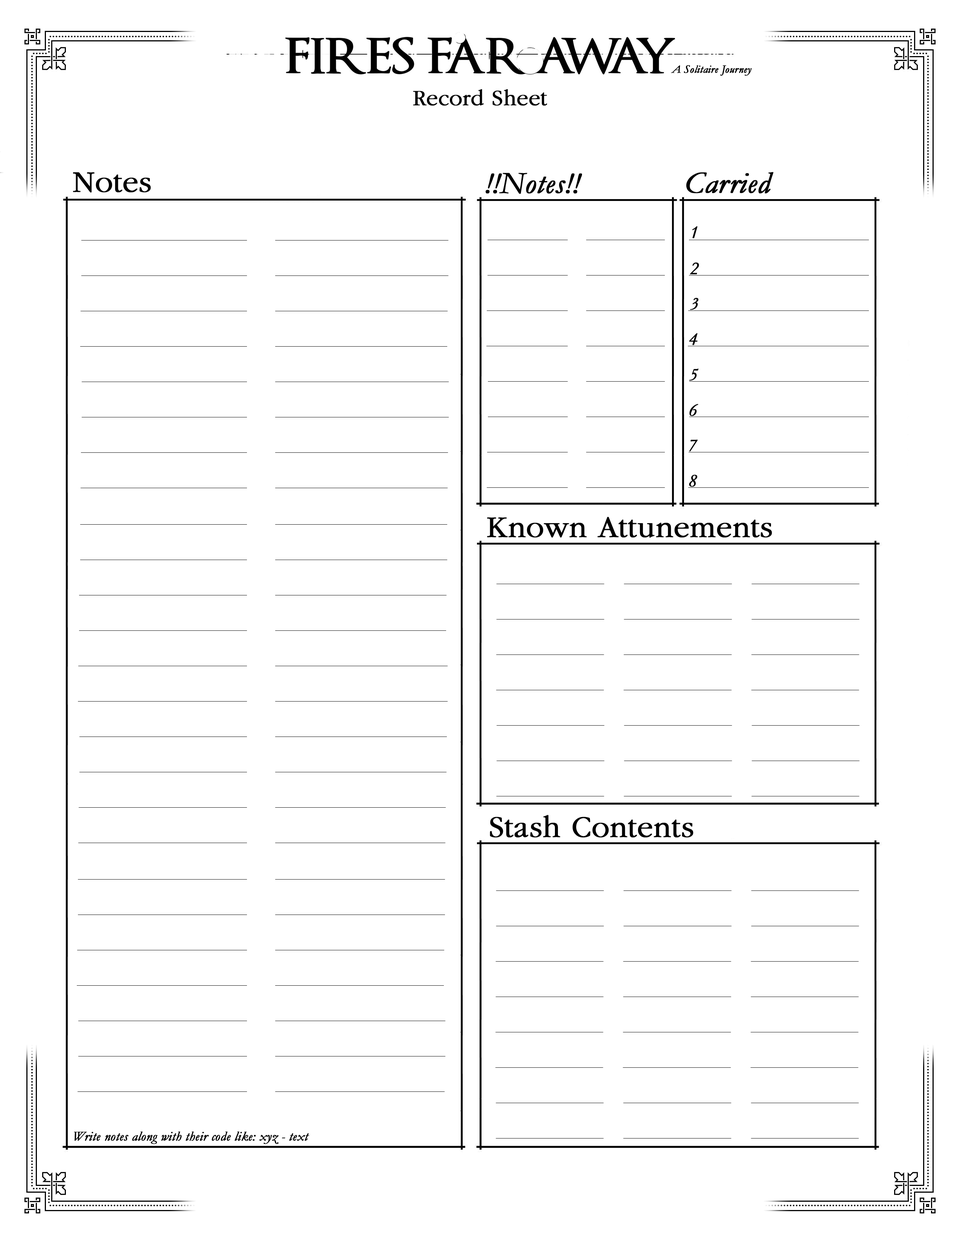
<style>
.page{position:relative;width:960px;height:1242px;background:#ffffff}
.page>*{position:absolute;margin:0}
.t1{font:11.3px "Garamond-Italic";color:#010101;font-weight:bold}
.t2{font:22.6px "Garamond";color:#000000;font-weight:bold}
.t3{font:30.9px "Garamond";color:#000000;font-weight:bold}
.t4{font:30.9px "Garamond-Italic";color:#000000;font-weight:bold}
.t5{font:18.1px "Garamond-Italic";color:#000000;font-weight:bold}
.t6{font:13.6px "Garamond-Italic";color:#000000;font-weight:bold}
</style>
<div class="page">
<p class="t1" style="left:671px;top:65px;width:81px;height:11px">A Solitaire Journey</p>
<p class="t2" style="left:413px;top:89px;width:134px;height:17px">Record Sheet</p>
<p class="t3" style="left:73px;top:172px;width:78px;height:21px">Notes</p>
<p class="t4" style="left:486px;top:173px;width:96px;height:21px">!!Notes!!</p>
<p class="t4" style="left:686px;top:172px;width:88px;height:21px">Carried</p>
<p class="t5" style="left:692px;top:226px;width:6px;height:12px">1</p>
<p class="t5" style="left:690px;top:262px;width:9px;height:12px">2</p>
<p class="t5" style="left:690px;top:298px;width:8px;height:12px">3</p>
<p class="t5" style="left:689px;top:333px;width:9px;height:12px">4</p>
<p class="t5" style="left:689px;top:369px;width:10px;height:12px">5</p>
<p class="t5" style="left:689px;top:404px;width:9px;height:12px">6</p>
<p class="t5" style="left:689px;top:440px;width:9px;height:12px">7</p>
<p class="t5" style="left:689px;top:475px;width:8px;height:12px">8</p>
<p class="t3" style="left:487px;top:517px;width:285px;height:21px">Known Attunements</p>
<p class="t3" style="left:490px;top:815px;width:203px;height:23px">Stash Contents</p>
<p class="t6" style="left:74px;top:1132px;width:235px;height:12px">Write notes along with their code like: xyz - text</p>
</div>
